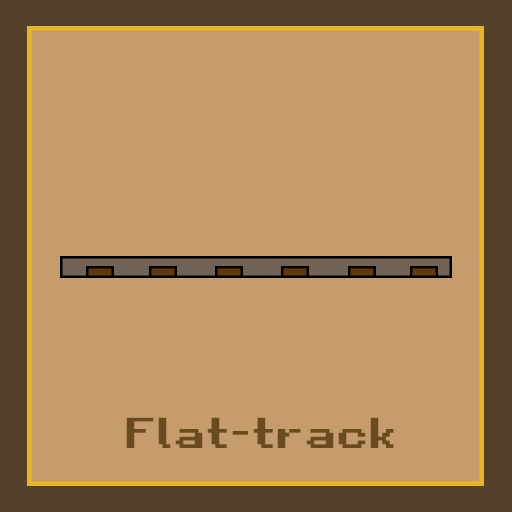
<style>
.page{position:relative;width:512px;height:512px;background:#c69c6d}
.page>*{position:absolute;margin:0}
.t1{font:41.7px "RetroGaming";color:#6b4b1d}
</style>
<div class="page">
<p class="t1" style="left:126px;top:417px;width:268px;height:31px">Flat-track</p>
</div>
